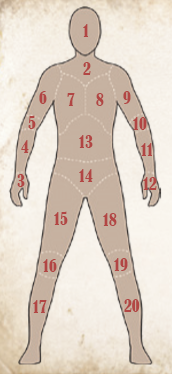
<style>
.page{position:relative;width:172px;height:374px}
.page>*{position:absolute;margin:0}
.t1{font:16px "BernardMT-Condensed";color:#b24644}
</style>
<div class="page">
<p class="t1" style="left:83px;top:24px;width:5px;height:13px">1</p>
<p class="t1" style="left:83px;top:62px;width:8px;height:13px">2</p>
<p class="t1" style="left:39px;top:91px;width:8px;height:13px">6</p>
<p class="t1" style="left:67px;top:93px;width:8px;height:13px">7</p>
<p class="t1" style="left:96px;top:93px;width:8px;height:13px">8</p>
<p class="t1" style="left:123px;top:91px;width:8px;height:13px">9</p>
<p class="t1" style="left:28px;top:115px;width:8px;height:14px">5</p>
<p class="t1" style="left:133px;top:117px;width:14px;height:13px">10</p>
<p class="t1" style="left:79px;top:135px;width:14px;height:13px">13</p>
<p class="t1" style="left:21px;top:140px;width:8px;height:13px">4</p>
<p class="t1" style="left:141px;top:143px;width:11px;height:13px">11</p>
<p class="t1" style="left:17px;top:174px;width:8px;height:13px">3</p>
<p class="t1" style="left:79px;top:169px;width:14px;height:13px">14</p>
<p class="t1" style="left:143px;top:177px;width:14px;height:13px">12</p>
<p class="t1" style="left:54px;top:211px;width:14px;height:14px">15</p>
<p class="t1" style="left:103px;top:213px;width:14px;height:13px">18</p>
<p class="t1" style="left:43px;top:259px;width:14px;height:13px">16</p>
<p class="t1" style="left:114px;top:258px;width:14px;height:13px">19</p>
<p class="t1" style="left:33px;top:300px;width:14px;height:13px">17</p>
<p class="t1" style="left:124px;top:299px;width:16px;height:13px">20</p>
</div>
